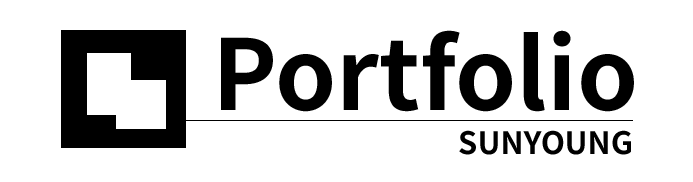
<style>
.page{position:relative;width:693px;height:182px;background:#ffffff}
.page>*{position:absolute;margin:0}
.t1{font:97.8px "NotoSansKR-Bold";color:#000000}
.t2{font:30.9px "NotoSansKR-Bold";color:#000000}
</style>
<div class="page">
<p class="t1" style="left:221px;top:30px;width:413px;height:82px">Portfolio</p>
<p class="t2" style="left:459px;top:130px;width:172px;height:25px">SUNYOUNG</p>
</div>
